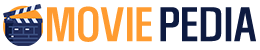
<style>
.page{position:relative;width:260px;height:50px;background:#ffffff}
.page>*{position:absolute;margin:0}
.t1{font:40px "HYKHeadLine-Medium";color:#ff9b30}
.t2{font:40px "HYKHeadLine-Medium";color:#0d1a40}
</style>
<div class="page">
<p class="t1" style="left:47px;top:6px;width:209px;height:36px">MOVIE <span class="t2">PEDIA</span></p>
</div>
